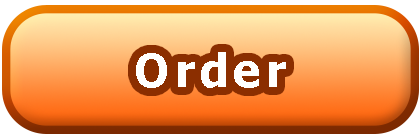
<style>
.page{position:relative;width:420px;height:135px}
.page>*{position:absolute;margin:0}
.t1{font:46.3px "Tahoma-Bold";letter-spacing:0.1em;color:#ffffff}
</style>
<div class="page">
<p class="t1" style="left:136px;top:52px;width:150px;height:36px">Order</p>
</div>
